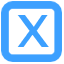
<style>
.page{position:relative;width:64px;height:64px;background:#ffffff}
.page>*{position:absolute;margin:0}
.t1{font:60px "LucidaConsole";color:#3ca0ff}
</style>
<div class="page">
<p class="t1" style="left:17px;top:15px;width:32px;height:32px">x</p>
</div>
